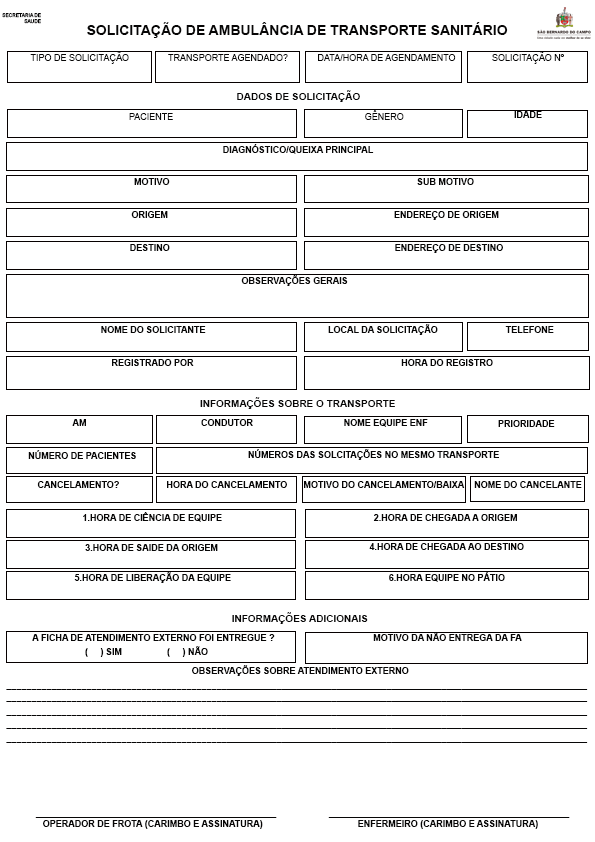
<style>
.page{position:relative;width:595px;height:842px;background:#ffffff}
.page>*{position:absolute;margin:0}
.t1{font:4.9px "ArialMT";color:#070606}
.t2{font:14px "Arial-BoldMT";color:#070606}
.t3{font:9px "ArialMT";color:#070606}
.t4{font:10px "Arial-BoldMT";color:#070606}
.t5{font:9px "Arial-BoldMT";color:#070606}
</style>
<div class="page">
<p class="t1" style="left:2px;top:13px;width:39px;height:11px;text-align:right">SECRETARIA DE<br>SAUDE</p>
<p class="t2" style="left:87px;top:22px;width:421px;height:16px">SOLICITAÇÃO DE AMBULÂNCIA DE TRANSPORTE SANITÁRIO</p>
<p class="t3" style="left:30px;top:51px;width:99px;height:13px">TIPO DE SOLICITAÇÃO</p>
<p class="t3" style="left:168px;top:54px;width:120px;height:7px">TRANSPORTE AGENDADO?</p>
<p class="t3" style="left:318px;top:54px;width:138px;height:7px">DATA/HORA DE AGENDAMENTO</p>
<p class="t3" style="left:492px;top:51px;width:72px;height:13px">SOLICITAÇÃO Nº</p>
<p class="t4" style="left:237px;top:90px;width:123px;height:12px">DADOS DE SOLICITAÇÃO</p>
<p class="t3" style="left:129px;top:113px;width:44px;height:7px">PACIENTE</p>
<p class="t3" style="left:365px;top:110px;width:39px;height:10px">GÊNERO</p>
<p class="t5" style="left:514px;top:111px;width:28px;height:7px">IDADE</p>
<p class="t5" style="left:223px;top:144px;width:151px;height:10px">DIAGNÓSTICO/QUEIXA PRINCIPAL</p>
<p class="t5" style="left:134px;top:178px;width:36px;height:7px">MOTIVO</p>
<p class="t5" style="left:417px;top:178px;width:57px;height:7px">SUB MOTIVO</p>
<p class="t5" style="left:131px;top:211px;width:37px;height:7px">ORIGEM</p>
<p class="t5" style="left:394px;top:211px;width:105px;height:9px">ENDEREÇO DE ORIGEM</p>
<p class="t5" style="left:130px;top:244px;width:40px;height:7px">DESTINO</p>
<p class="t5" style="left:395px;top:244px;width:108px;height:9px">ENDEREÇO DE DESTINO</p>
<p class="t5" style="left:241px;top:275px;width:107px;height:11px">OBSERVAÇÕES GERAIS</p>
<p class="t5" style="left:101px;top:326px;width:105px;height:7px">NOME DO SOLICITANTE</p>
<p class="t5" style="left:328px;top:324px;width:110px;height:11px">LOCAL DA SOLICITAÇÃO</p>
<p class="t5" style="left:505px;top:326px;width:49px;height:7px">TELEFONE</p>
<p class="t5" style="left:112px;top:359px;width:82px;height:7px">REGISTRADO POR</p>
<p class="t5" style="left:401px;top:359px;width:92px;height:7px">HORA DO REGISTRO</p>
<p class="t4" style="left:200px;top:397px;width:195px;height:12px">INFORMAÇÕES SOBRE O TRANSPORTE</p>
<p class="t5" style="left:72px;top:419px;width:14px;height:7px">AM</p>
<p class="t5" style="left:201px;top:419px;width:52px;height:7px">CONDUTOR</p>
<p class="t5" style="left:344px;top:419px;width:84px;height:8px">NOME EQUIPE ENF</p>
<p class="t5" style="left:498px;top:420px;width:57px;height:7px">PRIORIDADE</p>
<p class="t5" style="left:248px;top:449px;width:251px;height:11px">NÚMEROS DAS SOLCITAÇÕES NO MESMO TRANSPORTE</p>
<p class="t5" style="left:28px;top:450px;width:108px;height:9px">NÚMERO DE PACIENTES</p>
<p class="t5" style="left:37px;top:481px;width:82px;height:7px">CANCELAMENTO?</p>
<p class="t5" style="left:167px;top:481px;width:120px;height:7px">HORA DO CANCELAMENTO</p>
<p class="t5" style="left:304px;top:481px;width:161px;height:7px">MOTIVO DO CANCELAMENTO/BAIXA</p>
<p class="t5" style="left:474px;top:481px;width:108px;height:7px">NOME DO CANCELANTE</p>
<p class="t5" style="left:83px;top:512px;width:139px;height:10px">1.HORA DE CIÊNCIA DE EQUIPE</p>
<p class="t5" style="left:373px;top:514px;width:144px;height:7px">2.HORA DE CHEGADA A ORIGEM</p>
<p class="t5" style="left:85px;top:544px;width:133px;height:7px">3.HORA DE SAIDE DA ORIGEM</p>
<p class="t5" style="left:369px;top:543px;width:155px;height:7px">4.HORA DE CHEGADA AO DESTINO</p>
<p class="t5" style="left:74px;top:572px;width:157px;height:11px">5.HORA DE LIBERAÇÃO DA EQUIPE</p>
<p class="t5" style="left:389px;top:572px;width:116px;height:10px">6.HORA EQUIPE NO PÁTIO</p>
<p class="t4" style="left:232px;top:612px;width:136px;height:12px">INFORMAÇÕES ADICIONAIS</p>
<p class="t5" style="left:32px;top:634px;width:243px;height:7px">A FICHA DE ATENDIMENTO EXTERNO FOI ENTREGUE ?</p>
<p class="t5" style="left:373px;top:632px;width:149px;height:9px">MOTIVO DA NÃO ENTREGA DA FA</p>
<p class="t5" style="left:85px;top:646px;width:123px;height:11px">(     ) SIM                  (     ) NÃO</p>
<p class="t5" style="left:192px;top:665px;width:217px;height:11px">OBSERVAÇÕES SOBRE ATENDIMENTO EXTERNO</p>
<p class="t5" style="left:6px;top:689px;width:582px;height:1px">____________________________________________________________________________________________________________________</p>
<p class="t5" style="left:6px;top:701px;width:582px;height:1px">____________________________________________________________________________________________________________________</p>
<p class="t5" style="left:6px;top:715px;width:582px;height:1px">____________________________________________________________________________________________________________________</p>
<p class="t5" style="left:6px;top:728px;width:582px;height:1px">____________________________________________________________________________________________________________________</p>
<p class="t5" style="left:6px;top:742px;width:582px;height:1px">____________________________________________________________________________________________________________________</p>
<p class="t5" style="left:35px;top:817px;width:242px;height:1px">________________________________________________</p>
<p class="t5" style="left:43px;top:820px;width:220px;height:9px">OPERADOR DE FROTA (CARIMBO E ASSINATURA)</p>
<p class="t5" style="left:328px;top:817px;width:242px;height:1px">________________________________________________</p>
<p class="t5" style="left:358px;top:820px;width:180px;height:9px">ENFERMEIRO (CARIMBO E ASSINATURA)</p>
</div>
